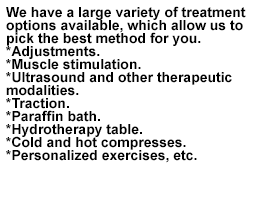
<style>
.page{position:relative;width:255px;height:205px;background:#ffffff}
.page>*{position:absolute;margin:0}
.t1{font:14px/13px "Arial-BoldMT";color:#000000}
</style>
<div class="page">
<p class="t1" style="left:6px;top:6px;width:240px;height:157px">We have a large variety of treatment options available, which allow us to pick the best method for you.<br>*Adjustments.<br>*Muscle stimulation.<br>*Ultrasound and other therapeutic modalities.<br>*Traction.<br>*Paraffin bath.<br>*Hydrotherapy table.<br>*Cold and hot compresses.<br>*Personalized exercises, etc.</p>
</div>
